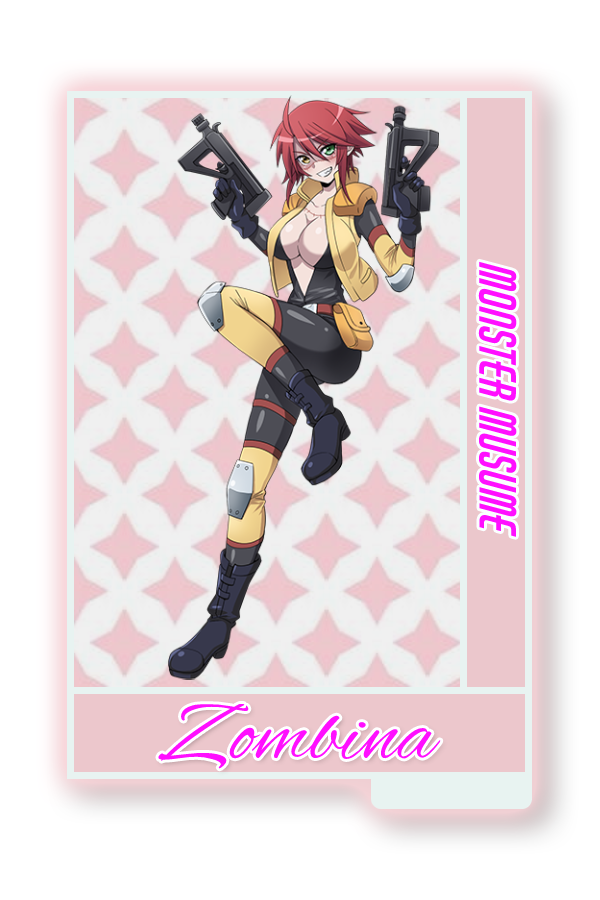
<style>
.page{position:relative;width:600px;height:900px;background:#ffffff}
.page>*{position:absolute;margin:0}
.t1{font:48.8px "AirAmerica-Regular";color:#ff0fff}
.t2{font:88px "AlexBrush-Regular";color:#ff0fff}
</style>
<div class="page">
<p class="t1" style="left:478px;top:261px;width:39px;height:276px;rotate:90deg">Monster Musume</p>
<p class="t2" style="left:158px;top:703px;width:283px;height:66px">Zombina</p>
</div>
